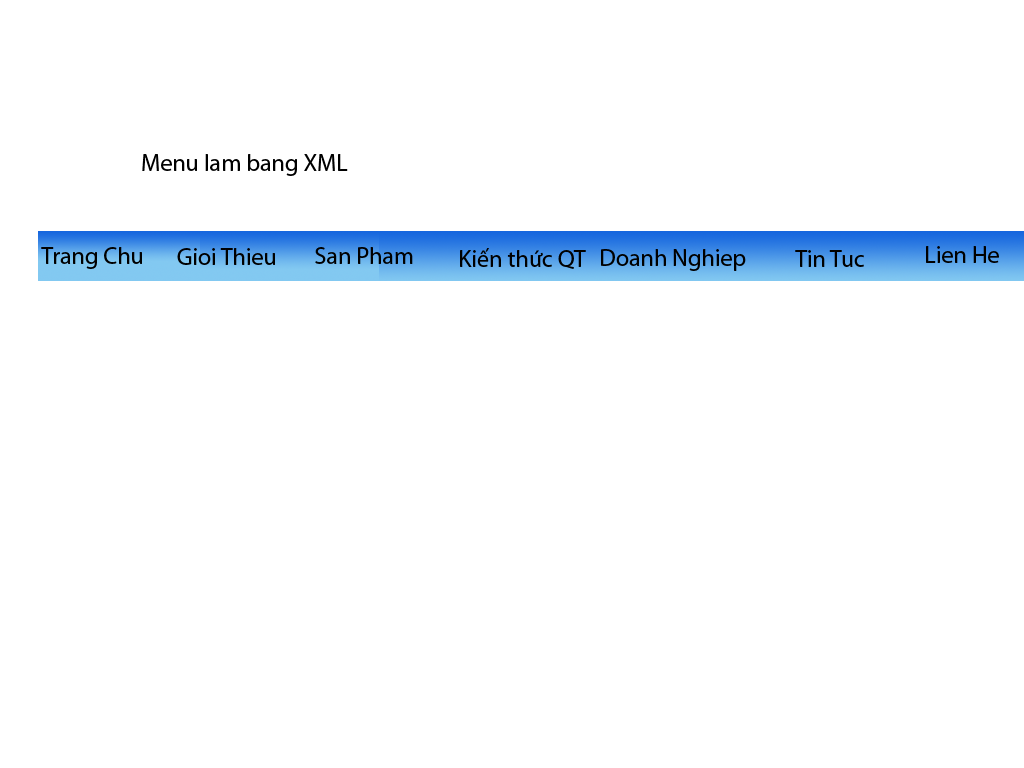
<style>
.page{position:relative;width:1024px;height:768px;background:#ffffff}
.page>*{position:absolute;margin:0}
.t1{font:24px "MyriadPro-Regular";color:#000000}
</style>
<div class="page">
<p class="t1" style="left:142px;top:154px;width:206px;height:22px">Menu lam bang XML</p>
<p class="t1" style="left:926px;top:246px;width:73px;height:17px">Lien He</p>
<p class="t1" style="left:41px;top:247px;width:101px;height:22px">Trang Chu</p>
<p class="t1" style="left:177px;top:248px;width:98px;height:17px">Gioi Thieu</p>
<p class="t1" style="left:315px;top:247px;width:98px;height:17px">San Pham</p>
<p class="t1" style="left:460px;top:248px;width:126px;height:21px">Kiến thức QT</p>
<p class="t1" style="left:601px;top:249px;width:145px;height:22px">Doanh Nghiep</p>
<p class="t1" style="left:795px;top:250px;width:69px;height:17px">Tin Tuc</p>
</div>
